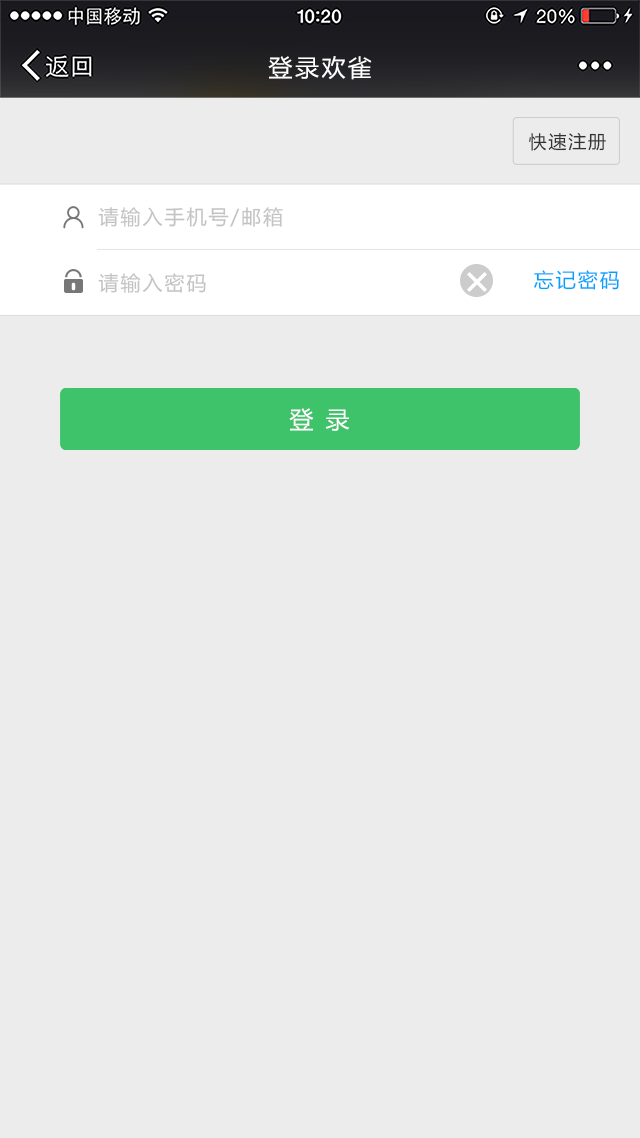
<style>
.page{position:relative;width:640px;height:1138px;background:#ececec}
.page>*{position:absolute;margin:0}
.t1{font:24px "MicrosoftYaHei";letter-spacing:0.1em;color:#ffffff}
.t2{font:18px "MicrosoftYaHei";letter-spacing:0.1em;color:#333333}
.t3{font:20px "MicrosoftYaHei";letter-spacing:0.1em;color:#c3c3c3}
.t4{font:20px "MicrosoftYaHei";letter-spacing:0.1em;color:#01a3ff}
</style>
<div class="page">
<p class="t1" style="left:268px;top:56px;width:104px;height:24px">登录欢雀</p>
<p class="t2" style="left:529px;top:133px;width:77px;height:18px">快速注册</p>
<p class="t3" style="left:98px;top:207px;width:185px;height:20px">请输入手机号/邮箱</p>
<p class="t4" style="left:534px;top:270px;width:85px;height:20px">忘记密码</p>
<p class="t3" style="left:98px;top:273px;width:108px;height:20px">请输入密码</p>
<p class="t1" style="left:289px;top:408px;width:61px;height:23px">登 录</p>
</div>
